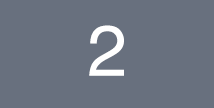
<style>
.page{position:relative;width:214px;height:108px;background:#68707e}
.page>*{position:absolute;margin:0}
.t1{font:72px "Helvetica";color:#ffffff}
</style>
<div class="page">
<p class="t1" style="left:89px;top:25px;width:35px;height:51px">2</p>
</div>
